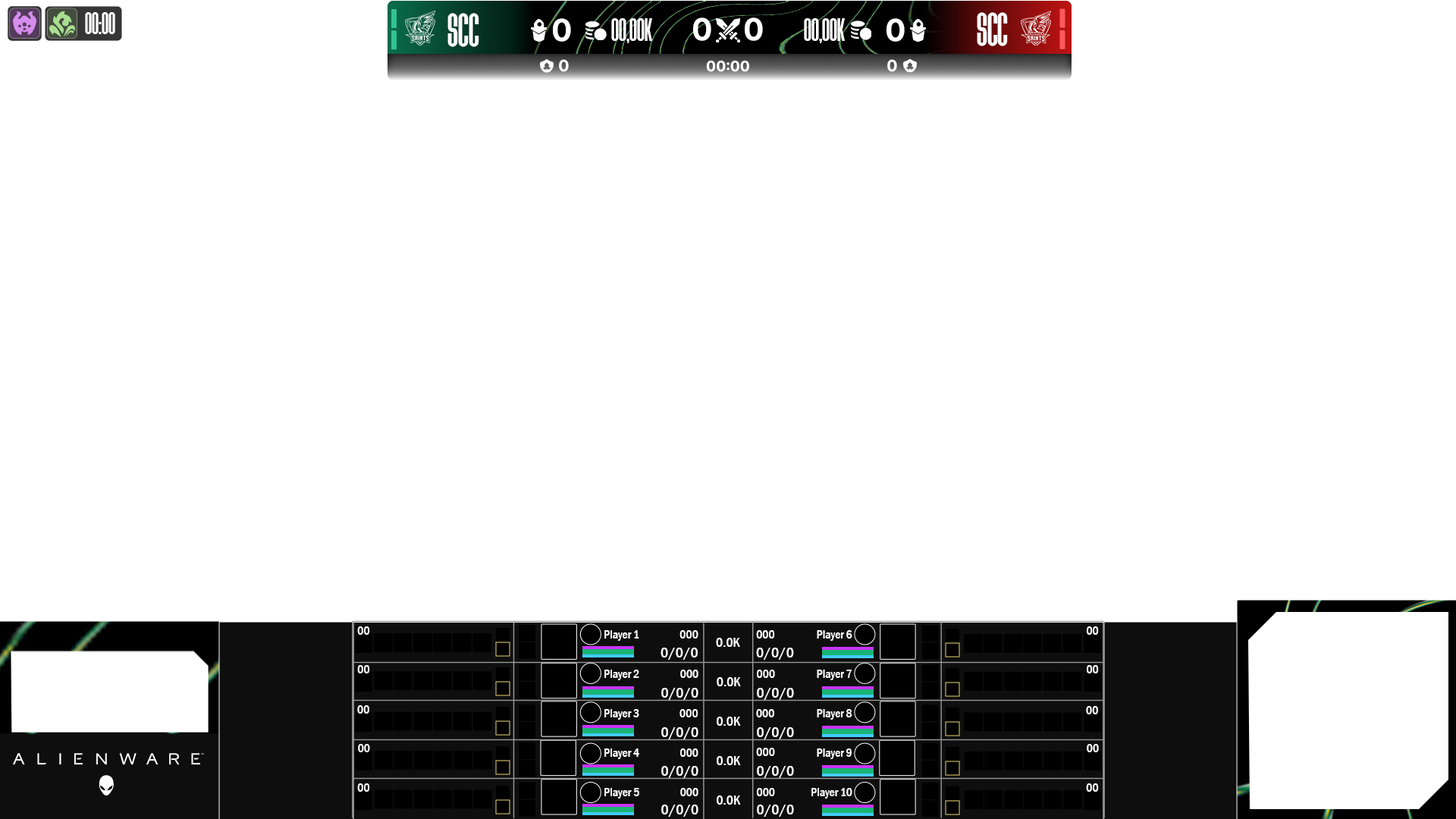
<style>
.page{position:relative;width:1456px;height:819px;background:#ffffff}
.page>*{position:absolute;margin:0}
.t1{font:28.2px "Heathergreen";color:#ffffff;text-transform:uppercase}
.t2{font:42.1px "Heathergreen";color:#ffffff;text-transform:uppercase}
.t3{font:30.3px "Inter-Bold";color:#ffffff;text-transform:uppercase}
.t4{font:30.3px "Heathergreen";color:#ffffff;text-transform:uppercase}
.t5{font:15.6px "Inter-Bold";color:#ffffff;text-transform:uppercase}
.t6{font:14.4px "Inter-Bold";color:#ffffff;text-transform:uppercase}
.t7{font:12.1px "FranklinGothic-MediumCond";color:#ffffff}
.t8{font:13.6px "FranklinGothic-MediumCond";color:#ffffff}
.t9{font:15.2px "FranklinGothic-MediumCond";color:#ffffff}
</style>
<div class="page">
<p class="t1" style="left:85px;top:12px;width:30px;height:22px">00:00</p>
<p class="t2" style="left:447px;top:13px;width:32px;height:34px">scc</p>
<p class="t3" style="left:693px;top:17px;width:18px;height:24px">0</p>
<p class="t3" style="left:745px;top:17px;width:18px;height:24px">0</p>
<p class="t2" style="left:977px;top:12px;width:31px;height:34px">scc</p>
<p class="t3" style="left:553px;top:18px;width:18px;height:24px">0</p>
<p class="t4" style="left:611px;top:18px;width:41px;height:25px">00,00K</p>
<p class="t4" style="left:804px;top:18px;width:41px;height:25px">00,00K</p>
<p class="t3" style="left:886px;top:18px;width:19px;height:24px">0</p>
<p class="t5" style="left:559px;top:59px;width:10px;height:13px">0</p>
<p class="t6" style="left:706px;top:60px;width:43px;height:12px">00:00</p>
<p class="t5" style="left:887px;top:59px;width:10px;height:13px">0</p>
<p class="t7" style="left:357px;top:626px;width:13px;height:9px">00</p>
<p class="t7" style="left:1087px;top:626px;width:12px;height:9px">00</p>
<p class="t7" style="left:604px;top:630px;width:35px;height:11px">Player 1</p>
<p class="t7" style="left:679px;top:630px;width:19px;height:9px">000</p>
<p class="t8" style="left:716px;top:638px;width:24px;height:9px">0.0K</p>
<p class="t7" style="left:756px;top:630px;width:19px;height:9px">000</p>
<p class="t7" style="left:817px;top:630px;width:35px;height:11px">Player 6</p>
<p class="t9" style="left:660px;top:648px;width:38px;height:12px">0/0/0</p>
<p class="t9" style="left:756px;top:648px;width:38px;height:12px">0/0/0</p>
<p class="t7" style="left:357px;top:665px;width:13px;height:8px">00</p>
<p class="t7" style="left:1087px;top:665px;width:12px;height:8px">00</p>
<p class="t7" style="left:604px;top:670px;width:35px;height:10px">Player 2</p>
<p class="t7" style="left:680px;top:670px;width:18px;height:8px">000</p>
<p class="t8" style="left:717px;top:677px;width:24px;height:9px">0.0K</p>
<p class="t7" style="left:757px;top:670px;width:18px;height:8px">000</p>
<p class="t7" style="left:817px;top:670px;width:35px;height:10px">Player 7</p>
<p class="t9" style="left:661px;top:688px;width:37px;height:12px">0/0/0</p>
<p class="t9" style="left:757px;top:688px;width:37px;height:12px">0/0/0</p>
<p class="t7" style="left:357px;top:705px;width:12px;height:9px">00</p>
<p class="t7" style="left:604px;top:709px;width:35px;height:11px">Player 3</p>
<p class="t7" style="left:679px;top:709px;width:19px;height:8px">000</p>
<p class="t7" style="left:756px;top:709px;width:18px;height:8px">000</p>
<p class="t7" style="left:817px;top:709px;width:35px;height:11px">Player 8</p>
<p class="t7" style="left:1086px;top:706px;width:12px;height:8px">00</p>
<p class="t8" style="left:717px;top:717px;width:24px;height:9px">0.0K</p>
<p class="t9" style="left:661px;top:727px;width:37px;height:12px">0/0/0</p>
<p class="t9" style="left:757px;top:727px;width:37px;height:12px">0/0/0</p>
<p class="t7" style="left:358px;top:744px;width:12px;height:8px">00</p>
<p class="t7" style="left:604px;top:748px;width:35px;height:11px">Player 4</p>
<p class="t7" style="left:680px;top:748px;width:18px;height:9px">000</p>
<p class="t7" style="left:756px;top:748px;width:19px;height:8px">000</p>
<p class="t7" style="left:817px;top:748px;width:35px;height:11px">Player 9</p>
<p class="t7" style="left:1087px;top:744px;width:12px;height:8px">00</p>
<p class="t8" style="left:717px;top:756px;width:24px;height:9px">0.0K</p>
<p class="t9" style="left:661px;top:766px;width:37px;height:12px">0/0/0</p>
<p class="t9" style="left:757px;top:766px;width:37px;height:12px">0/0/0</p>
<p class="t7" style="left:357px;top:783px;width:13px;height:9px">00</p>
<p class="t7" style="left:1086px;top:783px;width:13px;height:9px">00</p>
<p class="t7" style="left:604px;top:788px;width:35px;height:11px">Player 5</p>
<p class="t7" style="left:680px;top:788px;width:18px;height:8px">000</p>
<p class="t8" style="left:717px;top:795px;width:24px;height:10px">0.0K</p>
<p class="t7" style="left:757px;top:788px;width:18px;height:8px">000</p>
<p class="t7" style="left:811px;top:788px;width:41px;height:11px">Player 10</p>
<p class="t9" style="left:661px;top:805px;width:37px;height:12px">0/0/0</p>
<p class="t9" style="left:757px;top:805px;width:37px;height:12px">0/0/0</p>
</div>
